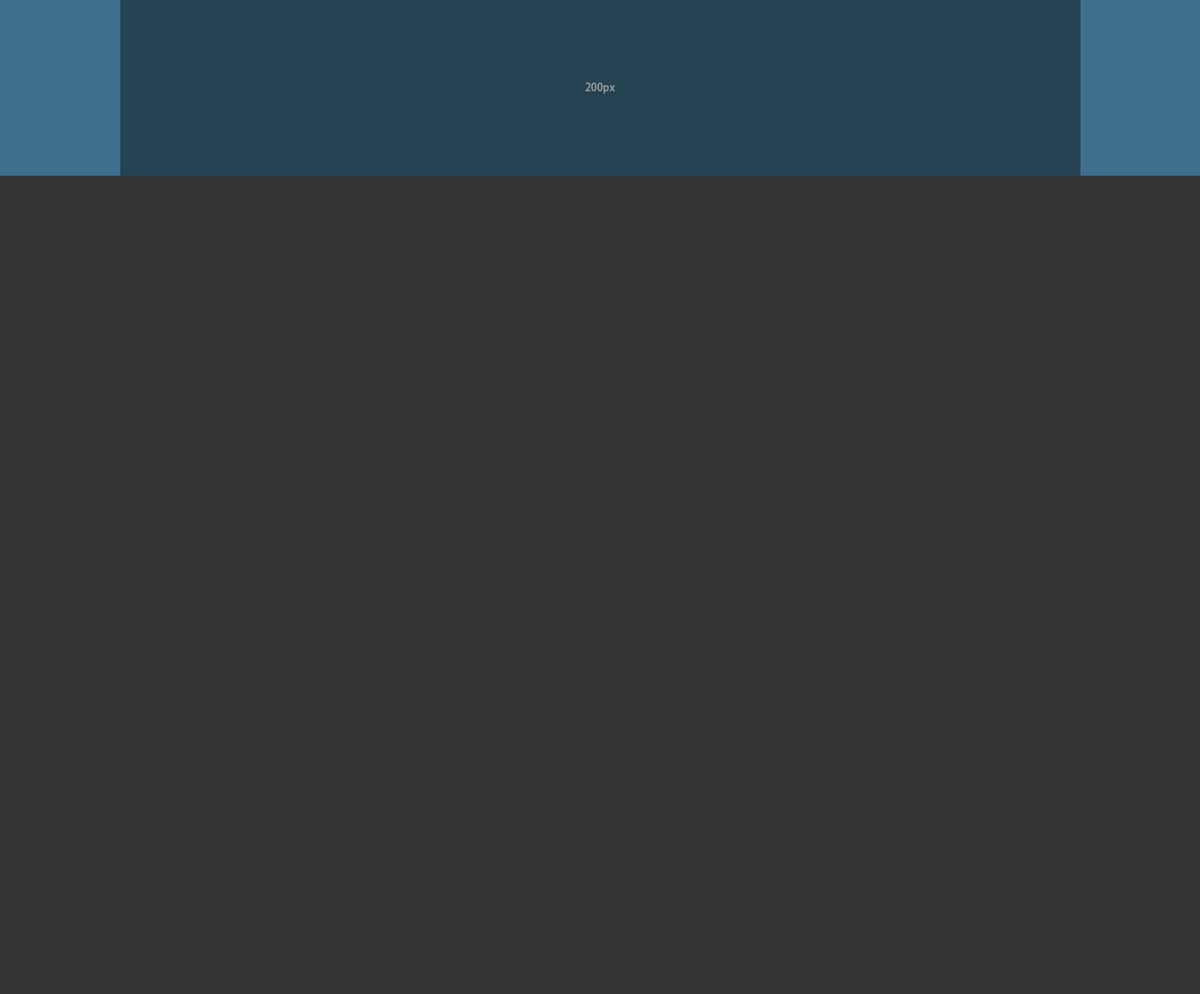
<style>
.page{position:relative;width:1200px;height:994px;background:#333333}
.page>*{position:absolute;margin:0}
.t1{font:10.5px "AdobeHeitiStd-Regular";color:#999898}
</style>
<div class="page">
<p class="t1" style="left:585px;top:83px;width:30px;height:11px">200px</p>
</div>
